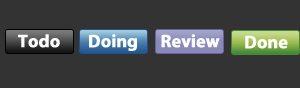
<style>
.page{position:relative;width:300px;height:88px;background:#333333}
.page>*{position:absolute;margin:0}
.t1{font:18px "MyriadPro-Bold";letter-spacing:-0.015em;color:#ffffff;font-weight:bold}
</style>
<div class="page">
<p class="t1" style="left:18px;top:34px;width:42px;height:14px">Todo</p>
<p class="t1" style="left:89px;top:34px;width:48px;height:17px">Doing</p>
<p class="t1" style="left:161px;top:34px;width:59px;height:14px">Review</p>
<p class="t1" style="left:245px;top:35px;width:43px;height:14px">Done</p>
</div>
